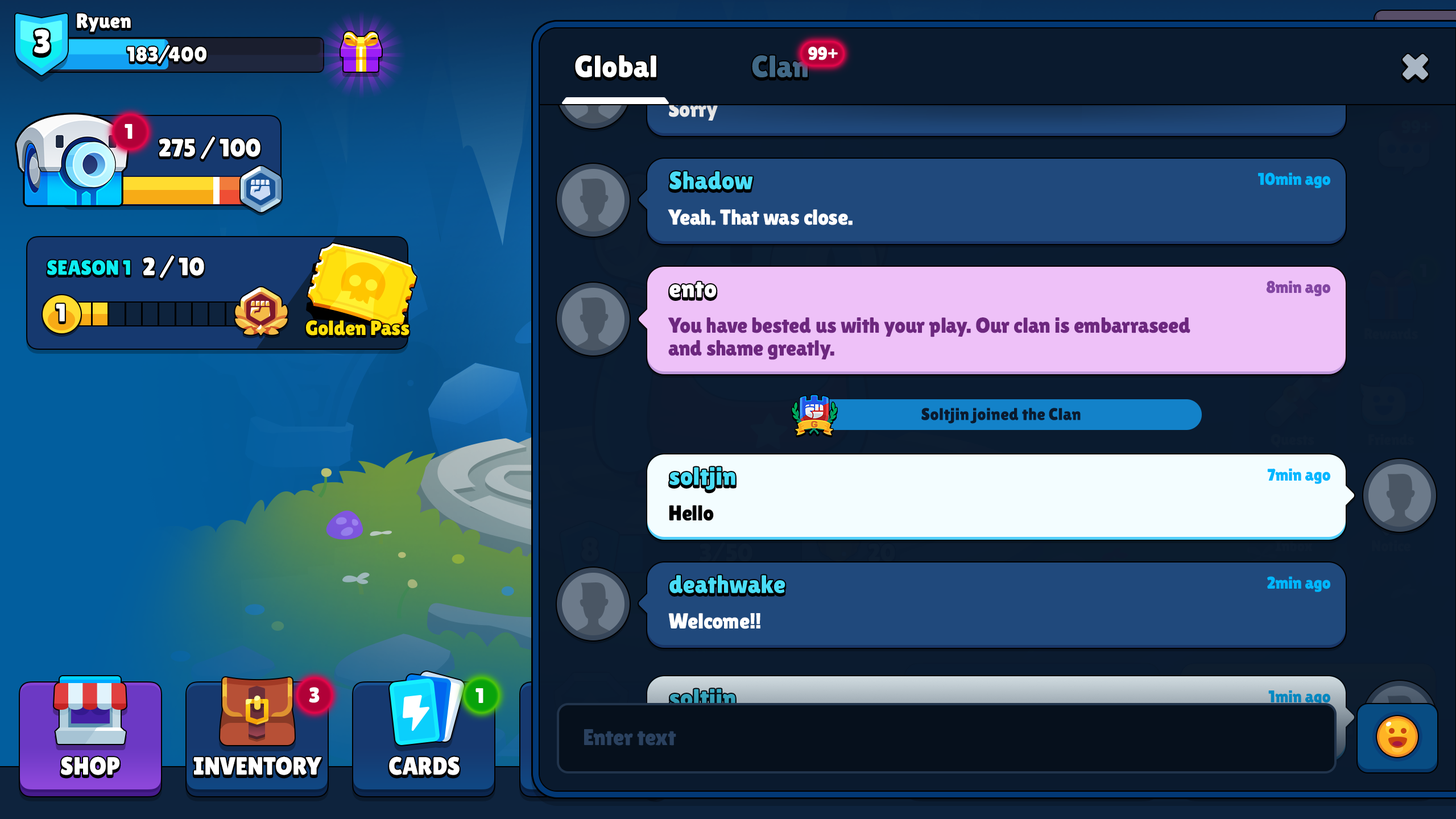
<style>
.page{position:relative;width:1456px;height:819px}
.page>*{position:absolute;margin:0}
.t1{font:18.2px "LilitaOne";color:#ffffff;text-transform:uppercase}
.t2{font:30.7px "LilitaOne";color:#ffffff}
.t3{font:30.7px "LilitaOne";color:#416987}
.t4{font:21.6px "LilitaOne";color:#e6e6e6}
.t5{font:25px "LilitaOne";color:#4addf7}
.t6{font:17.1px "LilitaOne";color:#00b7ff}
.t7{font:21.6px "LilitaOne";color:#ffffff}
.t8{font:25px "LilitaOne";color:#fefdff}
.t9{font:17.1px "LilitaOne";color:#8346a3}
.t10{font:21.6px/22.7px "LilitaOne";color:#6d277f}
.t11{font:17.1px "LilitaOne";color:#0a1a2e}
.t12{font:21.6px "LilitaOne";color:#000000}
.t13{font:25px "LilitaOne";color:#359db5}
.t14{font:17.1px "LilitaOne";color:#0386bd}
.t15{font:22.7px "LilitaOne";color:#2a415f}
</style>
<div class="page">
<p class="t1" style="left:808px;top:47px;width:30px;height:13px">99+</p>
<p class="t2" style="left:575px;top:55px;width:81px;height:22px">Global</p>
<p class="t3" style="left:752px;top:55px;width:56px;height:22px">Clan</p>
<p class="t4" style="left:669px;top:101px;width:49px;height:20px">Sorry</p>
<p class="t5" style="left:669px;top:171px;width:84px;height:18px">Shadow</p>
<p class="t6" style="left:1258px;top:172px;width:72px;height:16px">10min ago</p>
<p class="t7" style="left:668px;top:209px;width:185px;height:16px">Yeah. That was close.</p>
<p class="t8" style="left:669px;top:282px;width:48px;height:15px">ento</p>
<p class="t9" style="left:1266px;top:280px;width:64px;height:16px">8min ago</p>
<p class="t10" style="left:668px;top:317px;width:522px;height:43px">You have bested us with your play. Our clan is embarraseed<br>and shame greatly.</p>
<p class="t11" style="left:921px;top:408px;width:160px;height:16px">Soltjin joined the Clan</p>
<p class="t5" style="left:669px;top:467px;width:66px;height:23px">soltjin</p>
<p class="t6" style="left:1267px;top:468px;width:63px;height:16px">7min ago</p>
<p class="t12" style="left:669px;top:505px;width:45px;height:16px">Hello</p>
<p class="t5" style="left:669px;top:575px;width:116px;height:18px">deathwake</p>
<p class="t6" style="left:1267px;top:576px;width:63px;height:16px">2min ago</p>
<p class="t7" style="left:668px;top:613px;width:92px;height:16px">Welcome!!</p>
<p class="t13" style="left:669px;top:689px;width:66px;height:23px">soltjin</p>
<p class="t14" style="left:1268px;top:690px;width:62px;height:16px">1min ago</p>
<p class="t15" style="left:584px;top:729px;width:92px;height:17px">Enter text</p>
</div>
